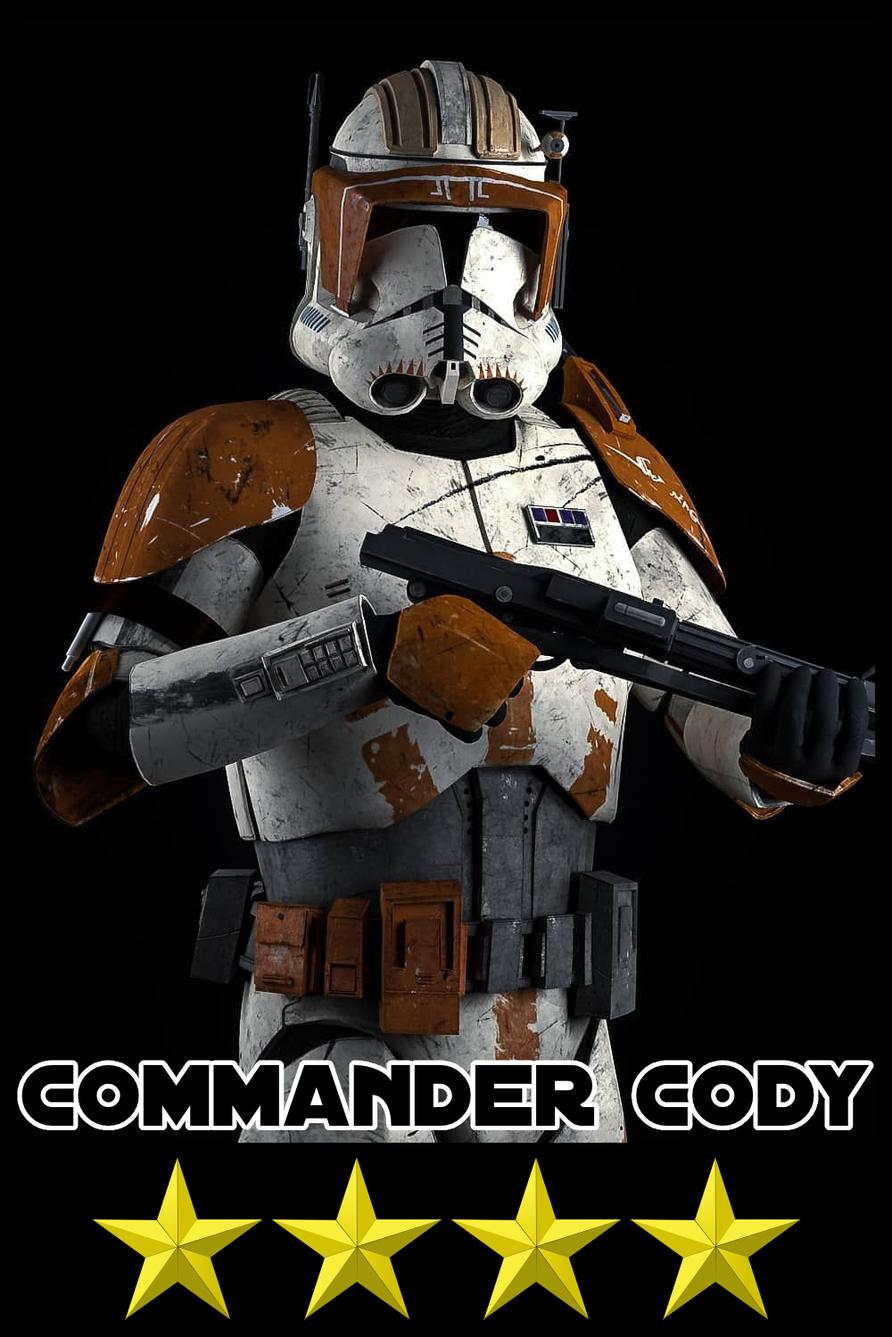
<style>
.page{position:relative;width:892px;height:1337px;background:#010101}
.page>*{position:absolute;margin:0}
.t1{font:93.5px "DistantGalaxy";color:#000000}
</style>
<div class="page">
<p class="t1" style="left:21px;top:1065px;width:848px;height:61px">commander cody</p>
</div>
